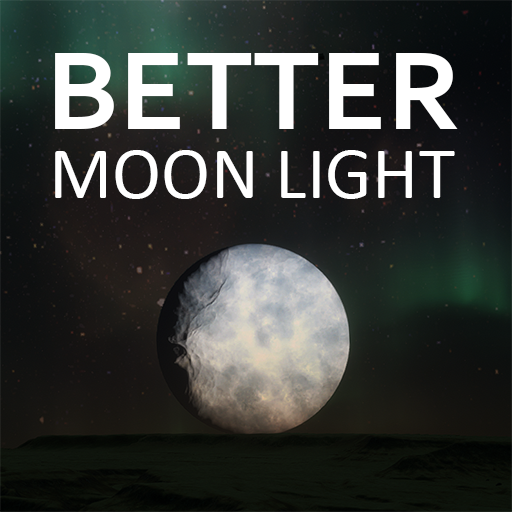
<style>
.page{position:relative;width:512px;height:512px}
.page>*{position:absolute;margin:0}
.t1{font:117.3px "Corbel-Bold";color:#ffffff}
.t2{font:74.4px "Calibri";color:#ffffff}
</style>
<div class="page">
<p class="t1" style="left:55px;top:53px;width:403px;height:76px">BETTER</p>
<p class="t2" style="left:55px;top:150px;width:400px;height:49px">MOON LIGHT</p>
</div>
